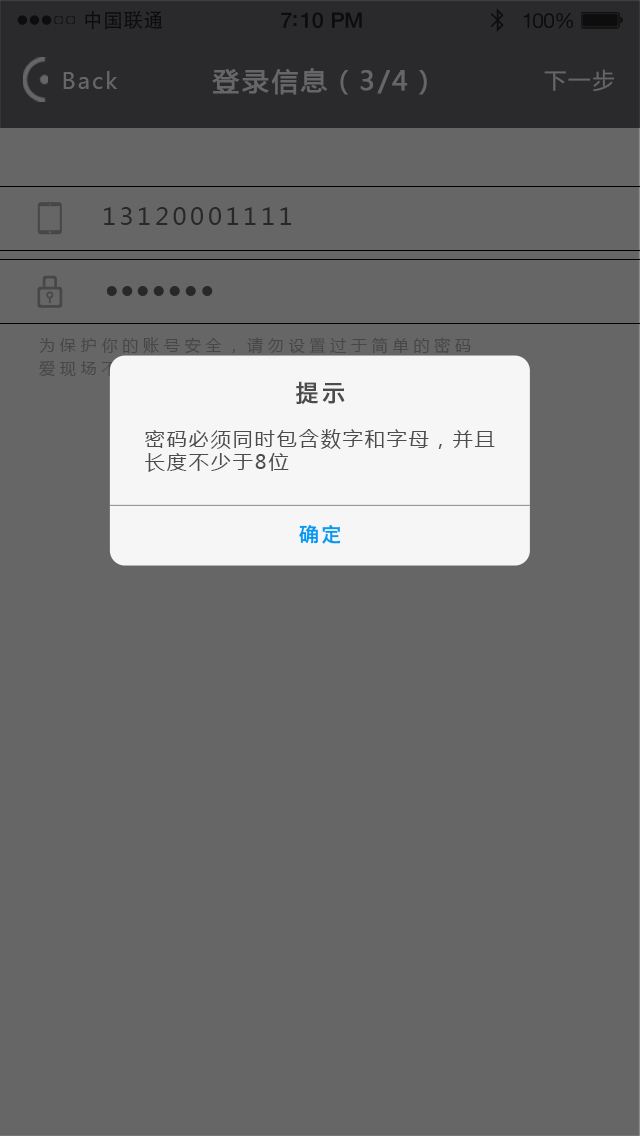
<style>
.page{position:relative;width:640px;height:1136px;background:#666666}
.page>*{position:absolute;margin:0}
.t1{font:19.7px "AdobeHeitiStd-Regular";letter-spacing:0.02em;color:#000000}
.t2{font:21.4px "HelveticaNeue-Medium";letter-spacing:-0.02em;color:#000000}
.t3{font:20.6px "HelveticaNeue";letter-spacing:-0.02em;color:#010101}
.t4{font:22px "MicrosoftYaHei";letter-spacing:0.1em;color:#666666}
.t5{font:26px "MicrosoftYaHei";letter-spacing:0.1em;color:#666666;font-weight:bold}
.t6{font:24px "MicrosoftYaHei";letter-spacing:0.15em;color:#292828}
.t7{font:24px "HiraginoSansGB-W6";letter-spacing:0.1em;color:#4c4c4c}
.t8{font:20px/23.2px "MicrosoftYaHei";letter-spacing:0.1em;color:#4c4c4c}
.t9{font:20px "HiraginoSansGB-W6";letter-spacing:0.1em;color:#019bf4}
</style>
<div class="page">
<p class="t1" style="left:85px;top:10px;width:78px;height:20px">中国联通</p>
<p class="t2" style="left:281px;top:12px;width:81px;height:16px">7:10 PM</p>
<p class="t3" style="left:523px;top:13px;width:50px;height:16px">100%</p>
<p class="t4" style="left:63px;top:71px;width:55px;height:18px">Back</p>
<p class="t5" style="left:212px;top:68px;width:215px;height:27px">登录信息（3/4）</p>
<p class="t4" style="left:544px;top:69px;width:71px;height:23px">下一步</p>
<p class="t6" style="left:104px;top:207px;width:188px;height:18px">13120001111</p>
<p class="t7" style="left:296px;top:381px;width:49px;height:24px">提示</p>
<p class="t8" style="left:145px;top:429px;width:350px;height:43px">密码必须同时包含数字和字母，并且<br>长度不少于8位</p>
<p class="t9" style="left:299px;top:525px;width:42px;height:19px">确定</p>
</div>
